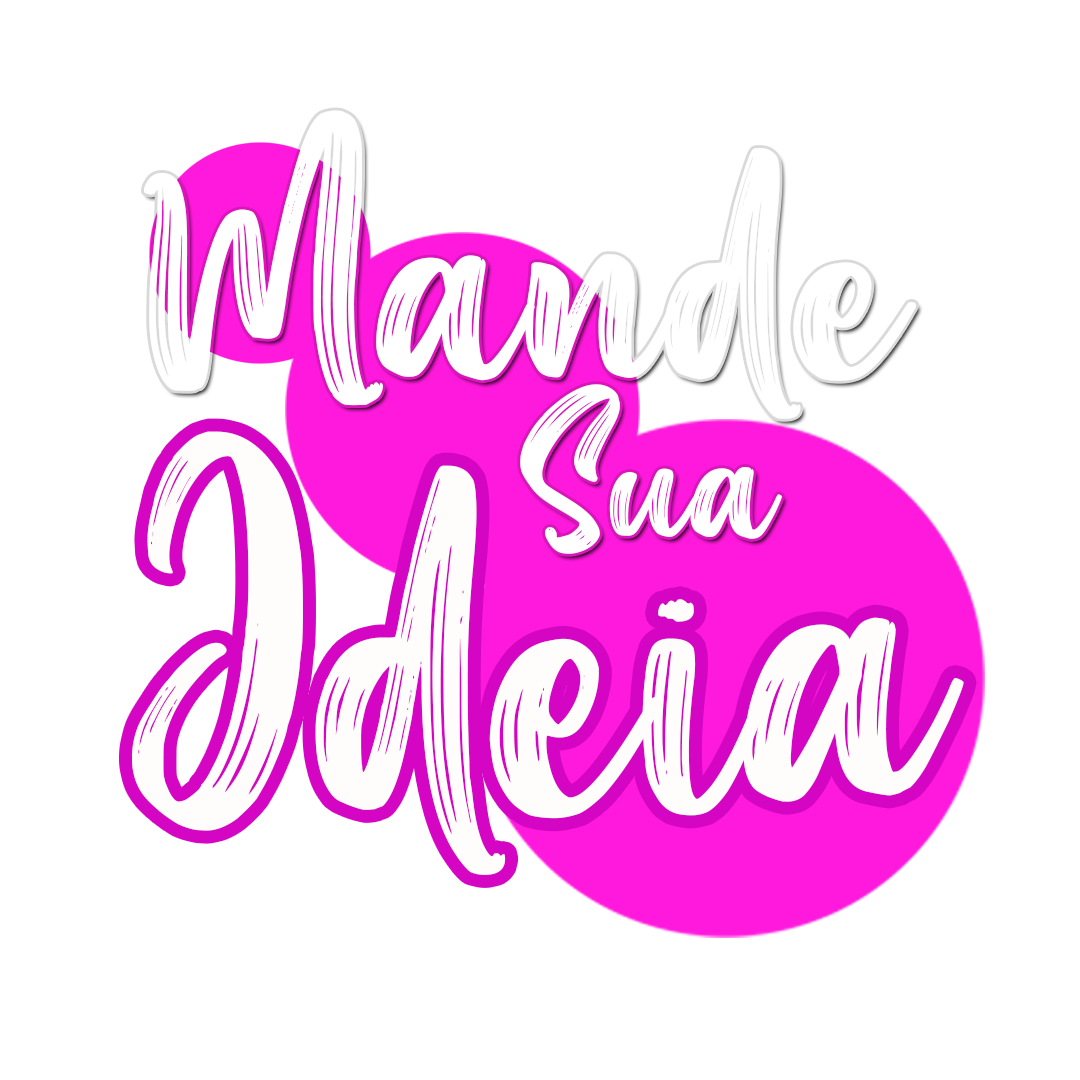
<style>
.page{position:relative;width:1080px;height:1080px;background:#ffffff}
.page>*{position:absolute;margin:0}
.t1{font:152.4px "AestheticViolet";color:#ffffff}
.t2{font:354.5px "AestheticViolet";color:#fffdfc}
</style>
<div class="page">
<p class="t1" style="left:520px;top:384px;width:262px;height:170px">Sua</p>
<p class="t2" style="left:132px;top:431px;width:832px;height:444px">Ideia</p>
</div>
